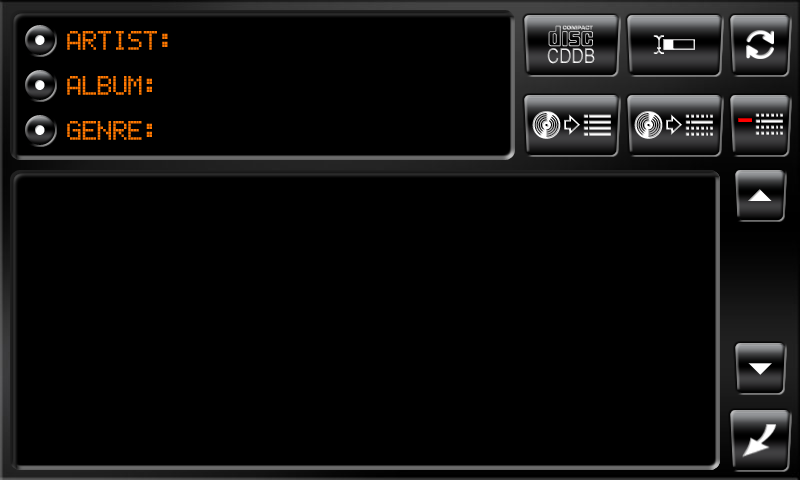
<style>
.page{position:relative;width:800px;height:480px;background:#000000}
.page>*{position:absolute;margin:0}
.t1{font:25px "EricssonGA628";color:#ff7800}
</style>
<div class="page">
<p class="t1" style="left:67px;top:31px;width:101px;height:19px">ARTIST:</p>
<p class="t1" style="left:67px;top:76px;width:85px;height:19px">ALBUM:</p>
<p class="t1" style="left:67px;top:121px;width:85px;height:19px">GENRE:</p>
</div>
